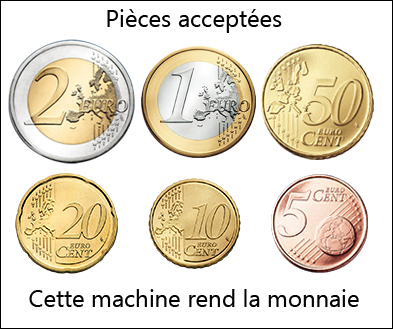
<style>
.page{position:relative;width:393px;height:329px;background:#ffffff}
.page>*{position:absolute;margin:0}
.t1{font:24px/10px "Ebrima";color:#020202}
</style>
<div class="page">
<p class="t1" style="left:29px;top:9px;width:330px;height:298px;text-align:center">Pièces acceptées<br><br><br><br><br><br><br><br><br><br><br><br><br><br><br><br><br><br><br><br><br><br><br><br><br><br><br><br>Cette machine rend la monnaie</p>
</div>
